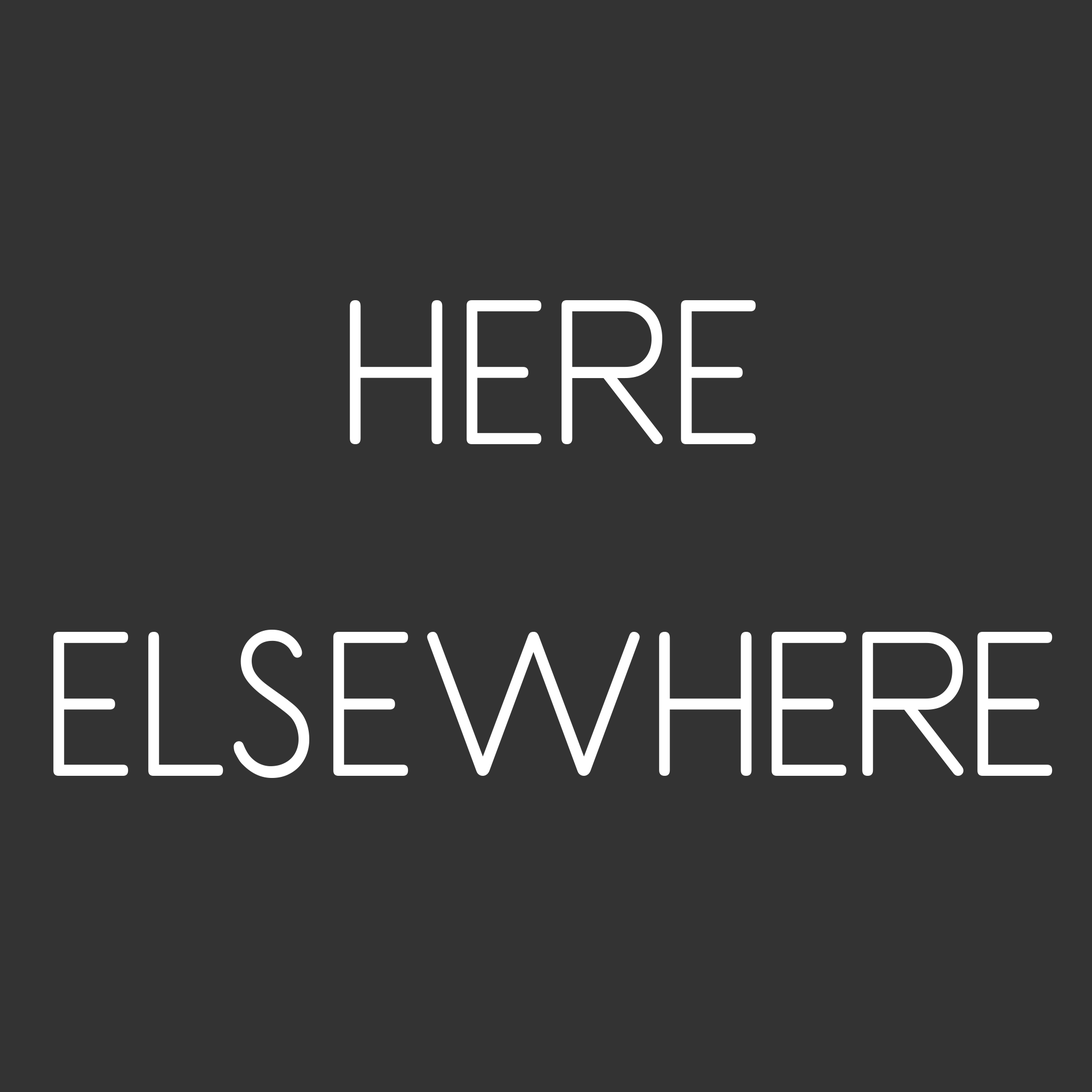
<style>
.page{position:relative;width:1092px;height:1092px;background:#333333}
.page>*{position:absolute;margin:0}
.t1{font:213.4px/165.7px "PrimerPrint-Regular";letter-spacing:-0.02em;color:#ffffff}
</style>
<div class="page">
<p class="t1" style="left:53px;top:300px;width:1000px;height:478px;text-align:center">HERE<br><br>ELSEWHERE</p>
</div>
